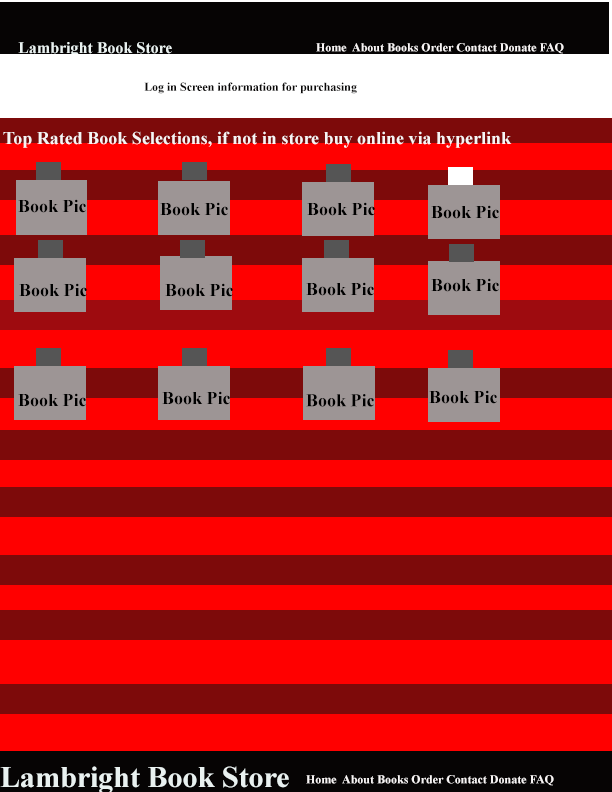
<style>
.page{position:relative;width:612px;height:792px;background:#ff0000}
.page>*{position:absolute;margin:0}
.t1{font:16px "TimesNewRomanPS-BoldMT";color:#e9f1f0}
.t2{font:12px "TimesNewRomanPS-BoldMT";color:#f7f4f4}
.t3{font:12px "TimesNewRomanPS-BoldMT";color:#0a0808}
.t4{font:18px "TimesNewRomanPS-BoldMT";color:#f7f4f4}
.t5{font:18px "TimesNewRomanPS-BoldMT";color:#000000}
.t6{font:30px "TimesNewRomanPS-BoldMT";color:#e9f1f0}
</style>
<div class="page">
<p class="t1" style="left:18px;top:42px;width:154px;height:15px">Lambright Book Store</p>
<p class="t2" style="left:316px;top:43px;width:248px;height:11px">Home  About Books Order Contact Donate FAQ</p>
<p class="t3" style="left:144px;top:82px;width:213px;height:12px">Log in Screen information for purchasing</p>
<p class="t4" style="left:3px;top:131px;width:509px;height:17px">Top Rated Book Selections, if not in store buy online via hyperlink</p>
<p class="t5" style="left:18px;top:199px;width:68px;height:14px">Book Pic</p>
<p class="t5" style="left:160px;top:202px;width:68px;height:14px">Book Pic</p>
<p class="t5" style="left:307px;top:202px;width:68px;height:14px">Book Pic</p>
<p class="t5" style="left:431px;top:205px;width:68px;height:14px">Book Pic</p>
<p class="t5" style="left:431px;top:278px;width:68px;height:14px">Book Pic</p>
<p class="t5" style="left:19px;top:283px;width:68px;height:14px">Book Pic</p>
<p class="t5" style="left:165px;top:283px;width:68px;height:14px">Book Pic</p>
<p class="t5" style="left:306px;top:282px;width:68px;height:14px">Book Pic</p>
<p class="t5" style="left:429px;top:390px;width:68px;height:14px">Book Pic</p>
<p class="t5" style="left:18px;top:393px;width:68px;height:14px">Book Pic</p>
<p class="t5" style="left:162px;top:391px;width:68px;height:14px">Book Pic</p>
<p class="t5" style="left:306px;top:394px;width:68px;height:13px">Book Pic</p>
<p class="t6" style="left:0px;top:766px;width:289px;height:28px">Lambright Book Store</p>
<p class="t2" style="left:306px;top:775px;width:248px;height:11px">Home  About Books Order Contact Donate FAQ</p>
</div>
